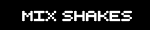
<style>
.page{position:relative;width:150px;height:30px;background:#000000}
.page>*{position:absolute;margin:0}
.t1{font:14px "RetroComputer";color:#ffffff}
</style>
<div class="page">
<p class="t1" style="left:22px;top:10px;width:110px;height:12px">Mix shakes</p>
</div>
